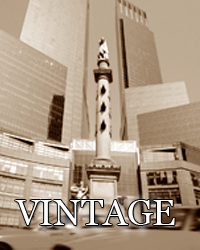
<style>
.page{position:relative;width:200px;height:250px}
.page>*{position:absolute;margin:0}
.t1{font:35.7px "Georgia";color:#fefefe}
</style>
<div class="page">
<p class="t1" style="left:15px;top:200px;width:160px;height:25px">VINTAGE</p>
</div>
